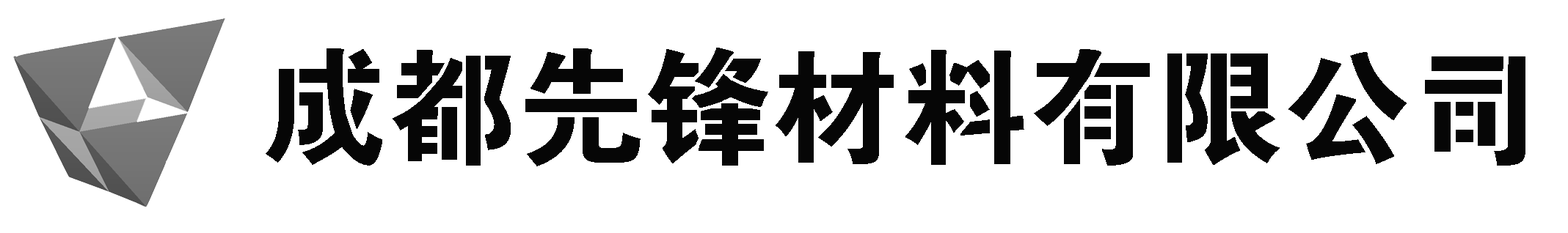
<style>
.page{position:relative;width:1568px;height:233px;background:#ffffff}
.page>*{position:absolute;margin:0}
.t1{font:127.7px "Ìõ·ùºÚÌå";color:#060606}
</style>
<div class="page">
<p class="t1" style="left:266px;top:48px;width:1259px;height:119px">成都先锋材料有限公司</p>
</div>
